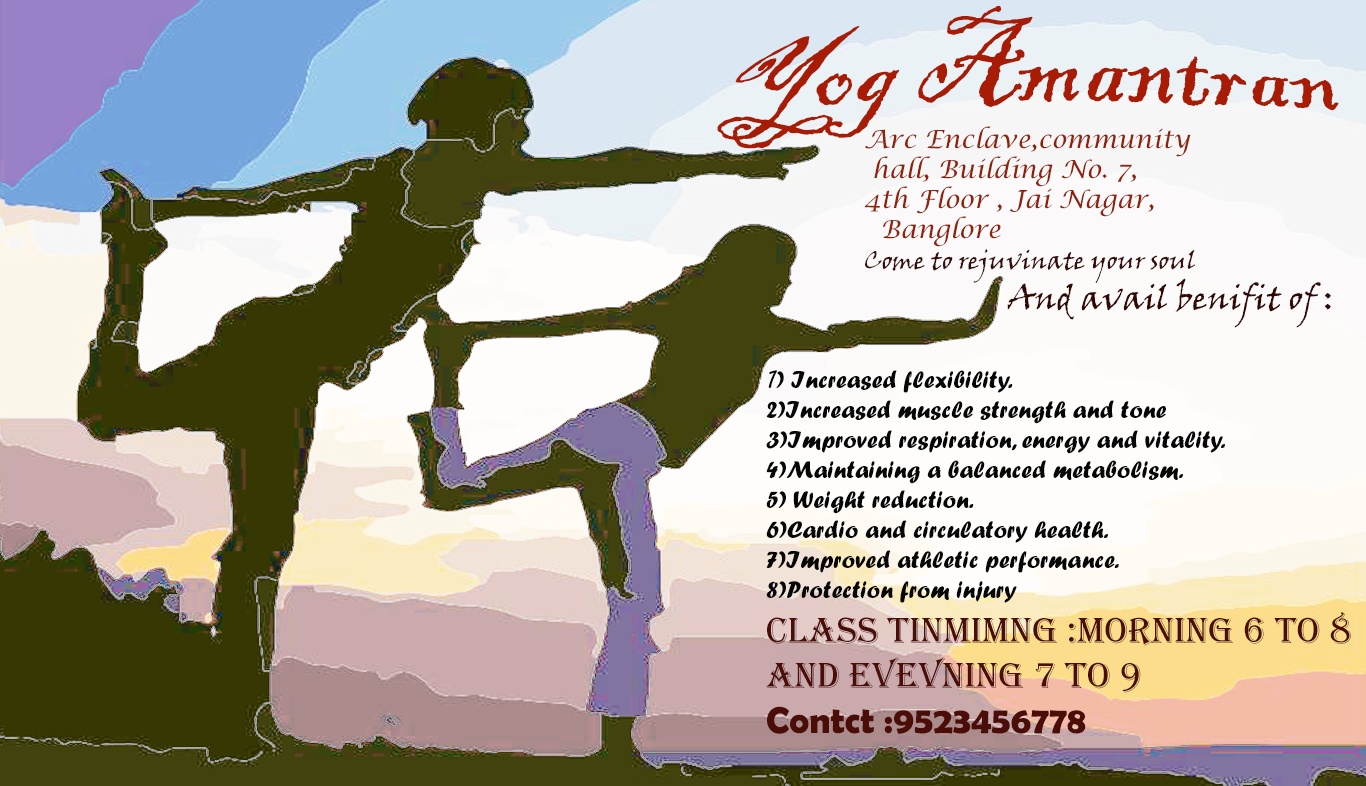
<style>
.page{position:relative;width:1366px;height:786px}
.page>*{position:absolute;margin:0}
.t1{font:100px "BlackadderITC-Regular";color:#a81b04}
.t2{font:25px "LucidaCalligraphy-Italic";color:#90210b}
.t3{font:25px "VinerHandITC";color:#360d0a}
.t4{font:33.3px "VinerHandITC";color:#320704}
.t5{font:25px "ForteMT";color:#060606}
.t6{font:25px "MVBoli";color:#060606}
.t7{font:37.5px "Algerian";color:#4b0d07}
.t8{font:37.5px "BerlinSansFBDemi-Bold";color:#4b0d07}
</style>
<div class="page">
<p class="t1" style="left:717px;top:6px;width:622px;height:143px">Yog Amantran</p>
<p class="t2" style="left:864px;top:126px;width:467px;height:202px">Arc Enclave,community<br> hall, Building No. 7, <br>4th Floor , Jai Nagar,<br>  Banglore<br><span class="t3">Come to rejuvinate your soul<br>                         </span><span class="t4">And avail benifit of :</span></p>
<p class="t5" style="left:766px;top:370px;width:585px;height:364px"><span class="t6">1</span>) Increased flexibility.<br>2)Increased muscle strength and tone<br>3)Improved respiration, energy and vitality.<br>4)Maintaining a balanced metabolism.<br>5) Weight reduction.<br>6)Cardio and circulatory health.<br>7)Improved athletic performance.<br>8)Protection from injury<br><span class="t7">class tinmimng :Morning 6 to 8 <br>and Evevning 7 to 9<br></span><span class="t8">Contct :9523456778</span></p>
</div>
